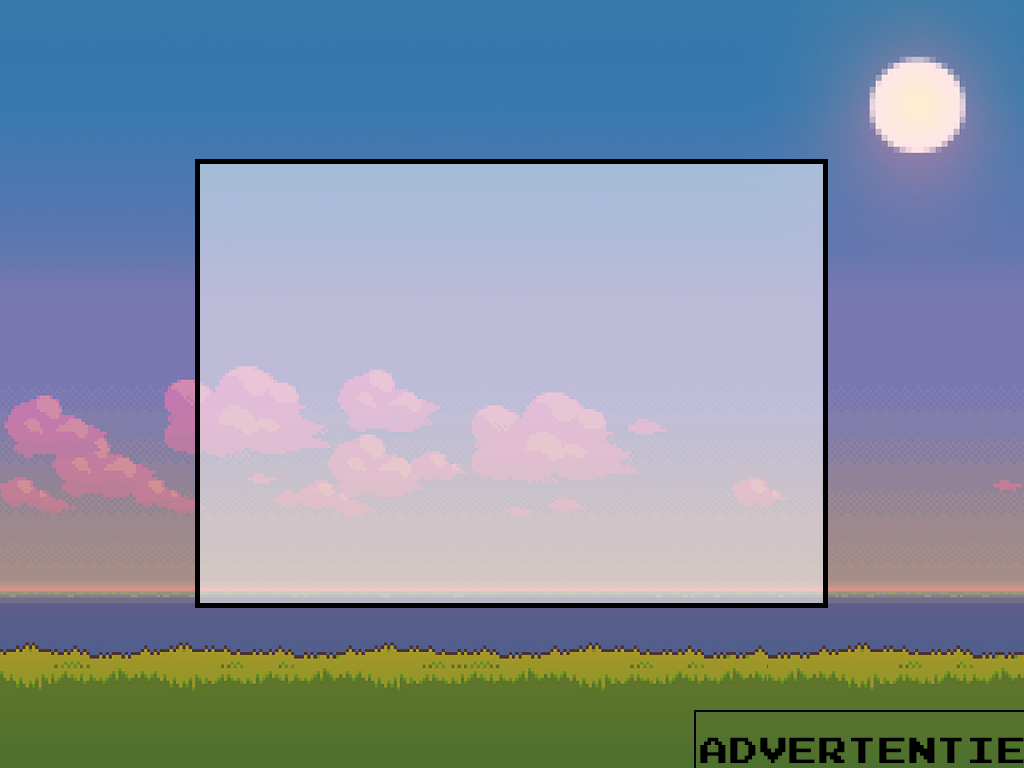
<style>
.page{position:relative;width:1024px;height:768px}
.page>*{position:absolute;margin:0}
.t1{font:36px "JoystixMonospace-Regular";color:#000000}
</style>
<div class="page">
<p class="t1" style="left:700px;top:737px;width:324px;height:26px">Advertentie</p>
</div>
